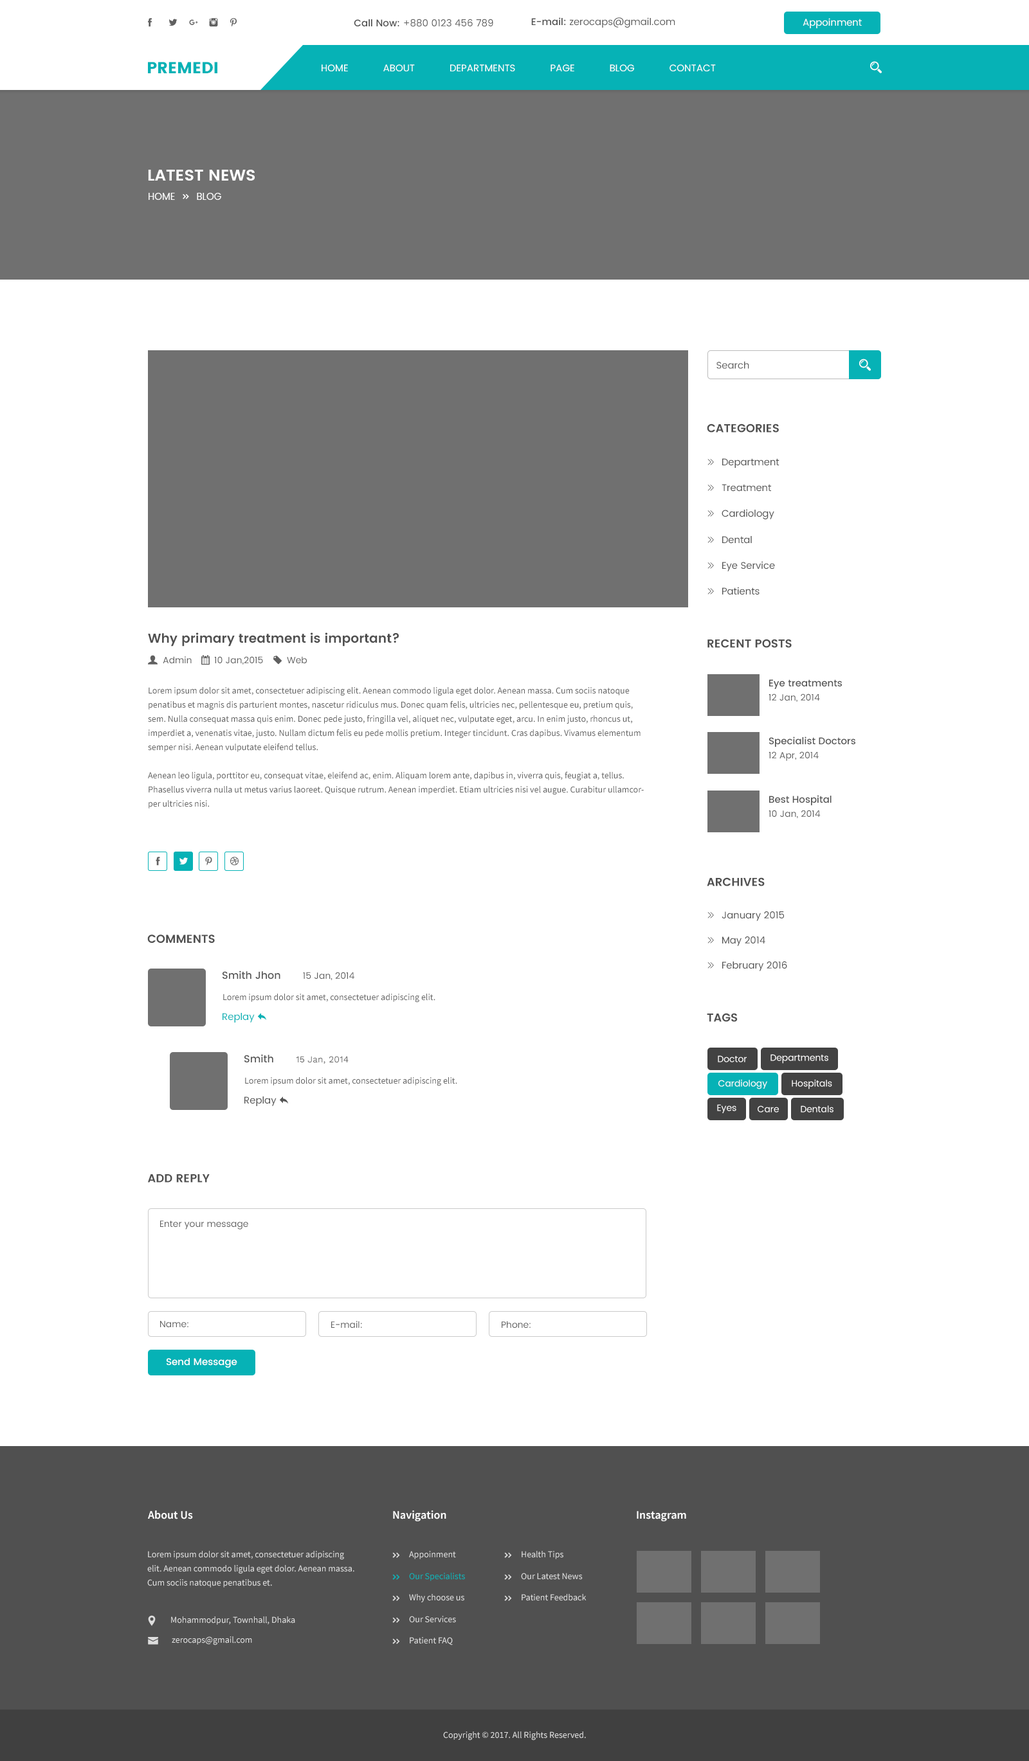
<style>
.page{position:relative;width:1029px;height:1761px;background:#ffffff}
.page>*{position:absolute;margin:0}
.t1{font:9.6px "Poppins-Regular";color:#606060}
.t2{font:9.6px "Poppins-Medium";color:#505050}
.t3{font:9.6px "Poppins-Regular";color:#fffefe}
.t4{font:16.1px "Poppins";color:#06b2b6}
.t5{font:9.6px "Poppins-Regular";color:#ffffff}
.t6{font:16.1px "Poppins-SemiBold";color:#ffffff}
.t7{font:11.6px "Poppins-SemiBold";color:#505050;text-transform:uppercase}
.t8{font:12.9px "Poppins-SemiBold";color:#505050}
.t9{font:9px "Poppins-Regular";color:#606060}
.t10{font:9px/14.1px "SourceSansPro-Regular";color:#606060}
.t11{font:9.6px "Poppins-Medium";color:#555555}
.t12{font:11.6px "Poppins-SemiBold";color:#505050}
.t13{font:10.3px "Poppins-Medium";color:#555555}
.t14{font:9px "SourceSansPro-Regular";color:#606060}
.t15{font:9px "WorkSans-Regular";color:#606060}
.t16{font:9px "Poppins-Regular";color:#fffefe}
.t17{font:9.6px "Poppins-Medium";color:#ffffff}
.t18{font:11.6px "SourceSansPro-Semibold";color:#ffffff}
.t19{font:9px/14.1px "SourceSansPro-Regular";color:#dddddd}
.t20{font:9px "SourceSansPro-Regular";color:#dddddd}
.t21{font:9px "SourceSansPro-Regular";color:#06b2b6}
</style>
<div class="page">
<p class="t1" style="left:531px;top:17px;width:144px;height:11px"><span class="t2">E-mail: </span>zerocaps@gmail.com</p>
<p class="t1" style="left:354px;top:19px;width:139px;height:8px"><span class="t2">Call Now: </span>+880 0123 456 789</p>
<p class="t3" style="left:802px;top:18px;width:59px;height:10px">Appoinment</p>
<p class="t4" style="left:148px;top:62px;width:69px;height:11px">PREMEDI</p>
<p class="t5" style="left:321px;top:64px;width:395px;height:7px">HOME            ABOUT            DEPARTMENTS            PAGE            BLOG            CONTACT</p>
<p class="t6" style="left:148px;top:170px;width:107px;height:11px">LATEST NEWS</p>
<p class="t1" style="left:716px;top:361px;width:33px;height:8px">Search</p>
<p class="t7" style="left:706px;top:424px;width:73px;height:9px">categories</p>
<p class="t8" style="left:148px;top:633px;width:251px;height:14px">Why primary treatment is important?</p>
<p class="t7" style="left:707px;top:639px;width:84px;height:9px">recent posts</p>
<p class="t9" style="left:163px;top:656px;width:29px;height:8px">Admin</p>
<p class="t9" style="left:214px;top:656px;width:49px;height:9px">10 Jan,2015</p>
<p class="t9" style="left:287px;top:656px;width:20px;height:8px">Web</p>
<p class="t10" style="left:148px;top:687px;width:496px;height:122px;text-align:right">Lorem ipsum dolor sit amet, consectetuer adipiscing elit. Aenean commodo ligula eget dolor. Aenean massa. Cum sociis natoque penatibus et magnis dis parturient montes, nascetur ridiculus mus. Donec quam felis, ultricies nec, pellentesque eu, pretium quis, sem. Nulla consequat massa quis enim. Donec pede justo, fringilla vel, aliquet nec, vulputate eget, arcu. In enim justo, rhoncus ut, imperdiet a, venenatis vitae, justo. Nullam dictum felis eu pede mollis pretium. Integer tincidunt. Cras dapibus. Vivamus elementum semper nisi. Aenean vulputate eleifend tellus. <br><br>Aenean leo ligula, porttitor eu, consequat vitae, eleifend ac, enim. Aliquam lorem ante, dapibus in, viverra quis, feugiat a, tellus. Phasellus viverra nulla ut metus varius laoreet. Quisque rutrum. Aenean imperdiet. Etiam ultricies nisi vel augue. Curabitur ullamcorper ultricies nisi.</p>
<p class="t11" style="left:769px;top:680px;width:73px;height:9px">Eye treatments</p>
<p class="t9" style="left:768px;top:694px;width:52px;height:8px">12 Jan, 2014</p>
<p class="t11" style="left:769px;top:737px;width:86px;height:10px">Specialist Doctors</p>
<p class="t9" style="left:768px;top:752px;width:50px;height:9px">12 Apr, 2014</p>
<p class="t11" style="left:769px;top:795px;width:62px;height:11px">Best Hospital</p>
<p class="t9" style="left:768px;top:810px;width:52px;height:8px">10 Jan, 2014</p>
<p class="t7" style="left:706px;top:878px;width:58px;height:9px">ARCHIVES</p>
<p class="t12" style="left:147px;top:935px;width:68px;height:9px">COMMENTS</p>
<p class="t9" style="left:222px;top:971px;width:132px;height:9px"><span class="t13">Smith Jhon       </span>15 Jan, 2014</p>
<p class="t14" style="left:223px;top:994px;width:212px;height:9px">Lorem ipsum dolor sit amet, consectetuer adipiscing elit.</p>
<p class="t7" style="left:706px;top:1013px;width:31px;height:9px">tags</p>
<p class="t15" style="left:244px;top:1054px;width:104px;height:11px"><span class="t13">Smith       </span>15 Jan, 2014</p>
<p class="t16" style="left:717px;top:1056px;width:29px;height:7px">Doctor</p>
<p class="t16" style="left:770px;top:1054px;width:58px;height:10px">Departments</p>
<p class="t14" style="left:245px;top:1077px;width:212px;height:9px">Lorem ipsum dolor sit amet, consectetuer adipiscing elit.</p>
<p class="t16" style="left:718px;top:1079px;width:49px;height:11px">Cardiology</p>
<p class="t16" style="left:791px;top:1079px;width:41px;height:11px">Hospitals</p>
<p class="t16" style="left:717px;top:1104px;width:19px;height:9px">Eyes</p>
<p class="t16" style="left:757px;top:1106px;width:22px;height:7px">Care</p>
<p class="t16" style="left:800px;top:1106px;width:33px;height:7px">Dentals</p>
<p class="t12" style="left:148px;top:1174px;width:62px;height:9px">ADD REPLY</p>
<p class="t9" style="left:160px;top:1221px;width:88px;height:9px">Enter your message</p>
<p class="t9" style="left:160px;top:1321px;width:28px;height:7px">Name:</p>
<p class="t9" style="left:331px;top:1321px;width:31px;height:8px">E-mail:</p>
<p class="t9" style="left:501px;top:1321px;width:29px;height:8px">Phone:</p>
<p class="t17" style="left:166px;top:1358px;width:71px;height:10px">Send Message</p>
<p class="t18" style="left:148px;top:1511px;width:45px;height:9px">About Us</p>
<p class="t18" style="left:393px;top:1511px;width:53px;height:11px">Navigation</p>
<p class="t18" style="left:636px;top:1511px;width:50px;height:11px">Instagram</p>
<p class="t19" style="left:147px;top:1551px;width:207px;height:37px">Lorem ipsum dolor sit amet, consectetuer adipiscing elit. Aenean commodo ligula eget dolor. Aenean massa. Cum sociis natoque penatibus et.</p>
<p class="t20" style="left:409px;top:1551px;width:47px;height:9px">Appoinment</p>
<p class="t20" style="left:521px;top:1551px;width:42px;height:9px">Health Tips</p>
<p class="t21" style="left:409px;top:1573px;width:56px;height:8px">Our Specialists</p>
<p class="t20" style="left:521px;top:1573px;width:61px;height:7px">Our Latest News</p>
<p class="t20" style="left:409px;top:1594px;width:55px;height:9px">Why choose us</p>
<p class="t20" style="left:521px;top:1594px;width:65px;height:7px">Patient Feedback</p>
<p class="t20" style="left:171px;top:1617px;width:124px;height:8px">Mohammodpur, Townhall, Dhaka</p>
<p class="t20" style="left:409px;top:1616px;width:47px;height:7px">Our Services</p>
<p class="t20" style="left:172px;top:1637px;width:80px;height:9px">zerocaps@gmail.com</p>
<p class="t20" style="left:410px;top:1637px;width:43px;height:9px">Patient FAQ</p>
<p class="t20" style="left:443px;top:1732px;width:143px;height:9px">Copyright © 2017. All Rights Reserved.</p>
</div>
